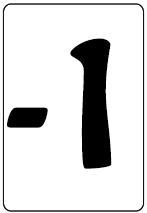
<style>
.page{position:relative;width:147px;height:213px;background:#ffffff}
.page>*{position:absolute;margin:0}
.t1{font:154.6px "HoboStd";color:#000000;scale:1.05 1}
</style>
<div class="page">
<p class="t1" style="left:6px;top:38px;width:106px;height:131px">-1</p>
</div>
